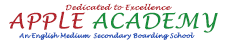
<style>
.page{position:relative;width:227px;height:40px;background:#ffffff}
.page>*{position:absolute;margin:0}
.t1{font:7px "LucidaHandwriting-Italic";letter-spacing:0.075em;color:#b3242c;font-style:italic}
.t2{font:20.9px "LucidaHandwriting-Italic";letter-spacing:0.05em;color:#b3242c}
.t3{font:20.9px "LucidaHandwriting-Italic";letter-spacing:0.05em;color:#1a8f3d}
.t4{font:20.9px "LucidaCalligraphy-Italic";letter-spacing:0.05em;color:#1a8f3d}
.t5{font:6.1px "LucidaHandwriting-Italic";color:#2d58b8;font-weight:bold}
</style>
<div class="page">
<p class="t1" style="left:65px;top:3px;width:107px;height:8px">Dedicated to Excellence</p>
<p class="t2" style="left:9px;top:11px;width:209px;height:22px">APPLE <span class="t3">ACADE</span><span class="t4">MY</span></p>
<p class="t5" style="left:19px;top:32px;width:176px;height:8px">An English Medium  Secondary Boarding School</p>
</div>
